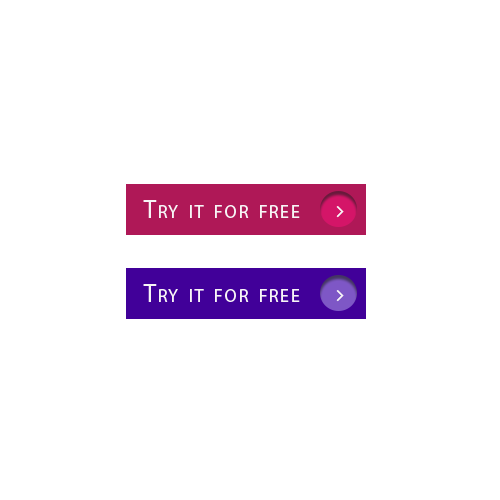
<style>
.page{position:relative;width:500px;height:500px;background:#ffffff}
.page>*{position:absolute;margin:0}
.t1{font:26.1px "MyriadPro-Regular";letter-spacing:0.1em;color:#f7f5f6;font-variant:small-caps}
</style>
<div class="page">
<p class="t1" style="left:143px;top:200px;width:157px;height:18px">Try it for free</p>
<p class="t1" style="left:143px;top:200px;width:157px;height:18px">Try it for free</p>
<p class="t1" style="left:143px;top:284px;width:157px;height:18px">Try it for free</p>
</div>
